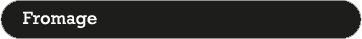
<style>
.page{position:relative;width:362px;height:39px;background:#1d1d1b}
.page>*{position:absolute;margin:0}
.t1{font:18px "Rockwell";color:#ffffff}
</style>
<div class="page">
<p class="t1" style="left:23px;top:11px;width:74px;height:18px">Fromage</p>
</div>
